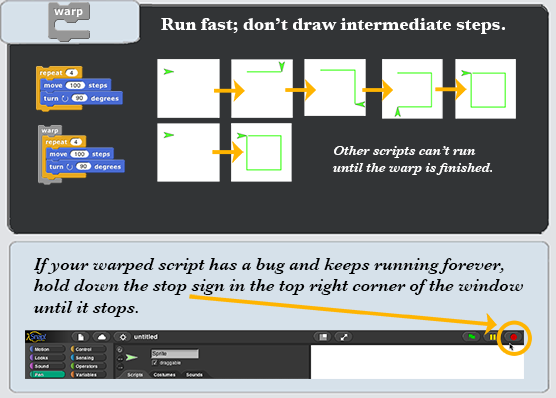
<style>
.page{position:relative;width:556px;height:398px;background:#323436}
.page>*{position:absolute;margin:0}
.t1{font:18px "Baskerville-Bold";color:#ffffff}
.t2{font:14px "Baskerville-SemiBoldItalic";color:#ffffff}
.t3{font:18px "Baskerville-SemiBoldItalic";color:#000000}
</style>
<div class="page">
<p class="t1" style="left:161px;top:18px;width:344px;height:16px">Run fast; don’t draw intermediate steps.</p>
<p class="t2" style="left:332px;top:146px;width:160px;height:29px">Other scripts can’t run<br>until the warp is ﬁnished.</p>
<p class="t3" style="left:33px;top:258px;width:491px;height:59px">If your warped script has a bug and keeps running forever,<br>hold down the stop sign in the top right corner of the window<br>until it stops.</p>
</div>
